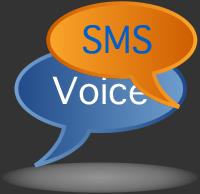
<style>
.page{position:relative;width:200px;height:194px;background:#333333}
.page>*{position:absolute;margin:0}
.t1{font:36px "Thonburi";color:#005fc8}
.t2{font:36px "Thonburi";color:#ffffff}
</style>
<div class="page">
<p class="t1" style="left:83px;top:25px;width:69px;height:29px">SMS</p>
<p class="t2" style="left:52px;top:76px;width:95px;height:29px">Voice</p>
</div>
